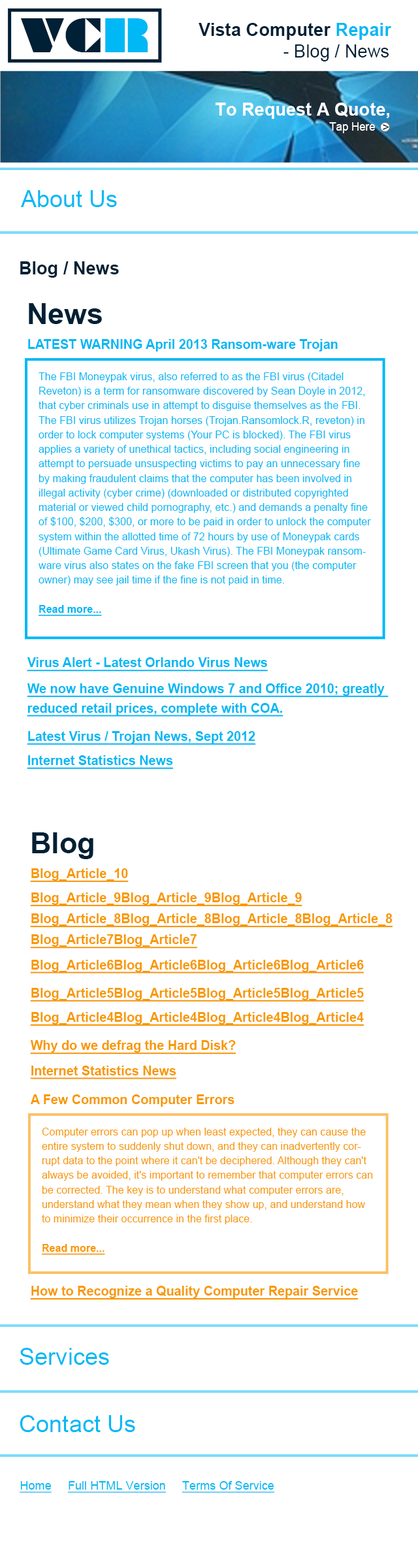
<style>
.page{position:relative;width:418px;height:1568px;background:#ffffff}
.page>*{position:absolute;margin:0}
.t1{font:44.3px "Braggadocio";color:#002035}
.t2{font:44.3px "Braggadocio";color:#00b8f5}
.t3{font:18px "Arial-BoldMT";color:#002035}
.t4{font:18px "Arial-BoldMT";color:#00b8f5}
.t5{font:18px "ArialMT";color:#002035}
.t6{font:17.7px "Arial-BoldMT";color:#ffffff}
.t7{font:11.8px "ArialMT";color:#ffffff;scale:0.93 1}
.t8{font:11.8px "ArialMT";color:#002035}
.t9{font:23.7px "ArialMT";color:#00b8f5}
.t10{font:17.7px "Arial-BoldMT";color:#002035}
.t11{font:29.1px "Arial-BoldMT";color:#002035}
.t12{font:12.9px "Arial-BoldMT";color:#00b8f5}
.t13{font:10.5px/14.5px "ArialMT";color:#00b8f5}
.t14{font:10.5px "Arial-BoldMT";color:#00b8f5}
.t15{font:10.5px/14.5px "Arial-BoldMT";color:#00b8f5;text-decoration:underline}
.t16{font:12.9px "Arial-BoldMT";color:#00b8f5;text-decoration:underline}
.t17{font:12.9px/19.4px "Arial-BoldMT";color:#00b8f5;text-decoration:underline}
.t18{font:12.9px "Arial-BoldMT";color:#f89800;text-decoration:underline}
.t19{font:12.9px "Arial-BoldMT";color:#f89800}
.t20{font:10.5px/14.5px "ArialMT";color:#f89800}
.t21{font:10.5px "Arial-BoldMT";color:#f89800}
.t22{font:10.5px/14.5px "Arial-BoldMT";color:#f89800;text-decoration:underline}
.t23{font:11.8px "ArialMT";color:#00b8f5;text-decoration:underline}
</style>
<div class="page">
<p class="t1" style="left:20px;top:18px;width:128px;height:34px">VC<span class="t2">R</span></p>
<p class="t3" style="left:199px;top:23px;width:193px;height:38px">Vista Computer <span class="t4">Repair<br>                 </span><span class="t5">- Blog / News</span></p>
<p class="t6" style="left:216px;top:103px;width:173px;height:16px">To Request A Quote,</p>
<p class="t7" style="left:329px;top:122px;width:47px;height:11px">Tap Here</p>
<p class="t8" style="left:383px;top:124px;width:6px;height:6px">&gt;</p>
<p class="t9" style="left:21px;top:190px;width:96px;height:17px">About Us</p>
<p class="t10" style="left:20px;top:261px;width:99px;height:17px">Blog / News</p>
<p class="t11" style="left:29px;top:303px;width:73px;height:21px">News</p>
<p class="t12" style="left:28px;top:339px;width:310px;height:12px">LATEST WARNING April 2013 Ransom-ware Trojan</p>
<p class="t13" style="left:39px;top:372px;width:332px;height:244px"><span class="t14"><br></span>The FBI Moneypak virus, also referred to as the FBI virus (Citadel Reveton) is a term for ransomware discovered by Sean Doyle in 2012, that cyber criminals use in attempt to disguise themselves as the FBI. The FBI virus utilizes Trojan horses (Trojan.Ransomlock.R, reveton) in order to lock computer systems (Your PC is blocked). The FBI virus applies a variety of unethical tactics, including social engineering in attempt to persuade unsuspecting victims to pay an unnecessary fine by making fraudulent claims that the computer has been involved in illegal activity (cyber crime) (downloaded or distributed copyrighted material or viewed child pornography, etc.) and demands a penalty fine of $100, $200, $300, or more to be paid in order to unlock the computer system within the allotted time of 72 hours by use of Moneypak cards (Ultimate Game Card Virus, Ukash Virus). The FBI Moneypak ransomware virus also states on the fake FBI screen that you (the computer owner) may see jail time if the fine is not paid in time.<br><br><span class="t15">Read more...</span></p>
<p class="t16" style="left:27px;top:657px;width:241px;height:15px">Virus Alert - Latest Orlando Virus News</p>
<p class="t17" style="left:27px;top:683px;width:362px;height:34px">We now have Genuine Windows 7 and Office 2010; greatly <br>reduced retail prices, complete with COA.</p>
<p class="t16" style="left:27px;top:731px;width:229px;height:14px">Latest Virus / Trojan News, Sept 2012</p>
<p class="t16" style="left:27px;top:755px;width:146px;height:14px">Internet Statistics News</p>
<p class="t11" style="left:32px;top:832px;width:61px;height:27px">Blog</p>
<p class="t18" style="left:30px;top:868px;width:99px;height:14px">Blog_Article_10</p>
<p class="t18" style="left:30px;top:892px;width:272px;height:14px">Blog_Article_9Blog_Article_9Blog_Article_9</p>
<p class="t18" style="left:30px;top:913px;width:363px;height:15px">Blog_Article_8Blog_Article_8Blog_Article_8Blog_Article_8</p>
<p class="t18" style="left:30px;top:934px;width:167px;height:15px">Blog_Article7Blog_Article7</p>
<p class="t18" style="left:30px;top:960px;width:334px;height:13px">Blog_Article6Blog_Article6Blog_Article6Blog_Article6</p>
<p class="t18" style="left:30px;top:988px;width:334px;height:14px">Blog_Article5Blog_Article5Blog_Article5Blog_Article5</p>
<p class="t18" style="left:30px;top:1012px;width:334px;height:14px">Blog_Article4Blog_Article4Blog_Article4Blog_Article4</p>
<p class="t18" style="left:30px;top:1040px;width:207px;height:14px">Why do we defrag the Hard Disk?</p>
<p class="t18" style="left:30px;top:1066px;width:146px;height:13px">Internet Statistics News</p>
<p class="t19" style="left:30px;top:1094px;width:205px;height:13px">A Few Common Computer Errors</p>
<p class="t20" style="left:41px;top:1128px;width:332px;height:127px"><span class="t21"><br></span>Computer errors can pop up when least expected, they can cause the entire system to suddenly shut down, and they can inadvertently corrupt data to the point where it can't be deciphered. Although they can't always be avoided, it's important to remember that computer errors can be corrected. The key is to understand what computer errors are, understand what they mean when they show up, and understand how to minimize their occurrence in the first place.<br><br><span class="t22">Read more...</span></p>
<p class="t18" style="left:30px;top:1286px;width:329px;height:14px">How to Recognize a Quality Computer Repair Service</p>
<p class="t9" style="left:20px;top:1348px;width:89px;height:17px">Services</p>
<p class="t9" style="left:20px;top:1415px;width:115px;height:17px">Contact Us</p>
<p class="t23" style="left:20px;top:1481px;width:254px;height:12px">Home     Full HTML Version     Terms Of Service</p>
</div>
